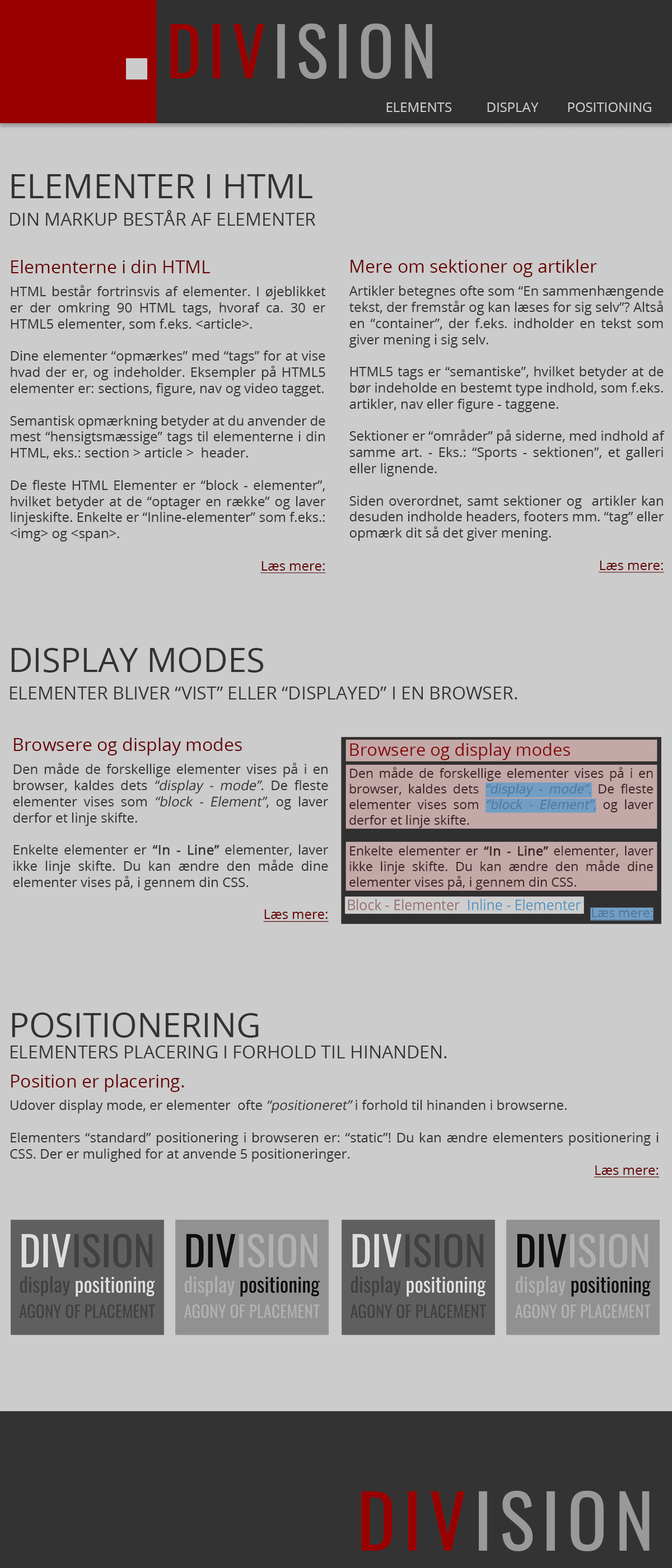
<style>
.page{position:relative;width:672px;height:1568px;background:#cccccc}
.page>*{position:absolute;margin:0}
.t1{font:67.2px "Oswald-Regular";letter-spacing:0.1em;color:#999999}
.t2{font:67.2px "Oswald-Regular";letter-spacing:0.1em;color:#990000}
.t3{font:13.4px "OpenSans-Regular";color:#cccccc}
.t4{font:17.9px "OpenSans-Regular";color:#333333}
.t5{font:33.6px "OpenSans-Regular";color:#333333}
.t6{font:13.4px "OpenSans-Regular";color:#333333}
.t7{font:17.9px/6.7px "OpenSans-Regular";color:#660000}
.t8{font:13.4px "OpenSans-Regular";color:#660000;text-decoration:underline}
.t9{font:13.4px "OpenSans-Regular";color:#333333;font-style:italic}
.t10{font:13.4px "OpenSans-Regular";color:#333333;font-weight:bold}
.t11{font:73.9px "Oswald-Regular";letter-spacing:0.1em;color:#999999}
.t12{font:73.9px "Oswald-Regular";letter-spacing:0.1em;color:#990000}
</style>
<div class="page">
<p class="t1" style="left:170px;top:24px;width:262px;height:55px"><span class="t2">DIV</span>ISION</p>
<p class="t3" style="left:386px;top:102px;width:265px;height:10px">ELEMENTS  DISPLAY  POSITIONING</p>
<p class="t4" style="left:10px;top:174px;width:306px;height:52px"><span class="t5">ELEMENTER I HTML<br></span>DIN MARKUP BESTÅR AF ELEMENTER</p>
<p class="t6" style="left:10px;top:260px;width:316px;height:313px;text-align:justify"><span class="t7">Elementerne i din HTML<br><br></span>HTML består fortrinsvis af elementer. I øjeblikket er der omkring 90 HTML tags, hvoraf ca. 30 er HTML5 elementer, som f.eks. &lt;article&gt;.<br><br>Dine elementer “opmærkes” med “tags” for at vise hvad der er, og indeholder. Eksempler på HTML5 elementer er: sections, figure, nav og video tagget.<br><br>Semantisk opmærkning betyder at du anvender de mest “hensigtsmæssige” tags til elementerne i din HTML, eks.: section &gt; article &gt;  header.<br><br>De fleste HTML Elementer er “block - elementer”, hvilket betyder at de “optager en række” og laver linjeskifte. Enkelte er “Inline-elementer” som f.eks.: &lt;img&gt; og &lt;span&gt;.<br><br><span class="t8">Læs mere:</span></p>
<p class="t6" style="left:349px;top:259px;width:316px;height:314px;text-align:justify"><span class="t7">Mere om sektioner og artikler<br><br></span>Artikler betegnes ofte som “En sammenhængende tekst, der fremstår og kan læses for sig selv”? Altså en “container”, der f.eks. indholder en tekst som giver mening i sig selv.<br><br>HTML5 tags er “semantiske”, hvilket betyder at de bør indeholde en bestemt type indhold, som f.eks. artikler, nav eller figure - taggene.<br><br>Sektioner er “områder” på siderne, med indhold af samme art. - Eks.: “Sports - sektionen”, et galleri eller lignende.<br><br>Siden overordnet, samt sektioner og  artikler kan desuden indholde headers, footers mm. “tag” eller opmærk dit så det giver mening.<br><br><span class="t8">Læs mere:</span></p>
<p class="t4" style="left:10px;top:647px;width:507px;height:52px"><span class="t5">DISPLAY MODES<br></span>ELEMENTER BLIVER “VIST” ELLER “DISPLAYED” I EN BROWSER.</p>
<p class="t6" style="left:13px;top:738px;width:316px;height:184px;text-align:justify"><span class="t7">Browsere og display modes<br><br></span>Den måde de forskellige elementer vises på i en browser, kaldes dets <span class="t9">“display - mode”</span>. De fleste elementer vises som <span class="t9">“block - Element”</span>, og laver derfor et linje skifte.<br><br>Enkelte elementer er<span class="t10"> “In - Line”</span> elementer, laver ikke linje skifte. Du kan ændre den måde dine elementer vises på, i gennem din CSS.<br><br><span class="t8">Læs mere:</span></p>
<p class="t4" style="left:11px;top:1012px;width:436px;height:46px"><span class="t5">POSITIONERING<br></span>ELEMENTERS PLACERING I FORHOLD TIL HINANDEN.</p>
<p class="t6" style="left:10px;top:1074px;width:649px;height:104px;text-align:justify"><span class="t7">Position er placering.<br><br></span>Udover display mode, er elementer  ofte <span class="t9">“positioneret”</span> i forhold til hinanden i browserne.<br><br>Elementers “standard” positionering i browseren er: “static”! Du kan ændre elementers positionering i CSS. Der er mulighed for at anvende 5 positioneringer.<br><span class="t8">Læs mere:</span></p>
<p class="t11" style="left:361px;top:1491px;width:289px;height:60px"><span class="t12">DIV</span>ISION</p>
</div>
